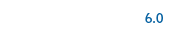
<style>
.page{position:relative;width:170px;height:40px;background:#ffffff}
.page>*{position:absolute;margin:0}
.t1{font:13px "BellGothicStd-Bold";color:#0963a2}
</style>
<div class="page">
<p class="t1" style="left:145px;top:13px;width:18px;height:10px">6.O</p>
</div>
